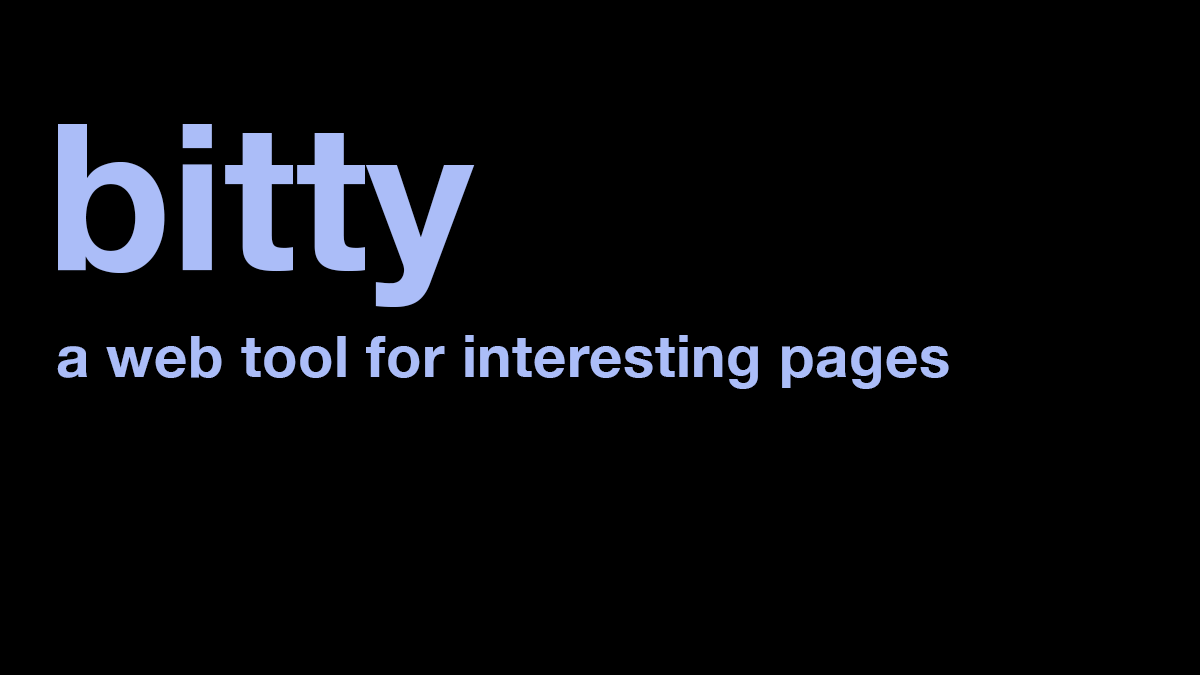
<style>
.page{position:relative;width:1200px;height:675px;background:#000000}
.page>*{position:absolute;margin:0}
.t1{font:204px "HelveticaNeue-Bold";color:#abbdf8}
.t2{font:58px "HelveticaNeue-Bold";letter-spacing:0.01em;color:#abbdf8}
</style>
<div class="page">
<p class="t1" style="left:58px;top:124px;width:417px;height:183px">bitty</p>
<p class="t2" style="left:57px;top:335px;width:892px;height:54px">a web tool for interesting pages</p>
</div>
